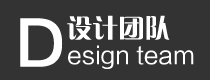
<style>
.page{position:relative;width:210px;height:80px;background:#333333}
.page>*{position:absolute;margin:0}
.t1{font:26px "FZCQJW--GB1-0";color:#ffffff}
.t2{font:60px "FZLTZHK--GBK1-0";color:#ffffff}
.t3{font:24px "FZLTHJW--GB1-0";color:#ffffff}
</style>
<div class="page">
<p class="t1" style="left:67px;top:15px;width:103px;height:25px">设计团队</p>
<p class="t2" style="left:20px;top:18px;width:43px;height:49px">D</p>
<p class="t3" style="left:68px;top:45px;width:126px;height:24px">esign team</p>
</div>
